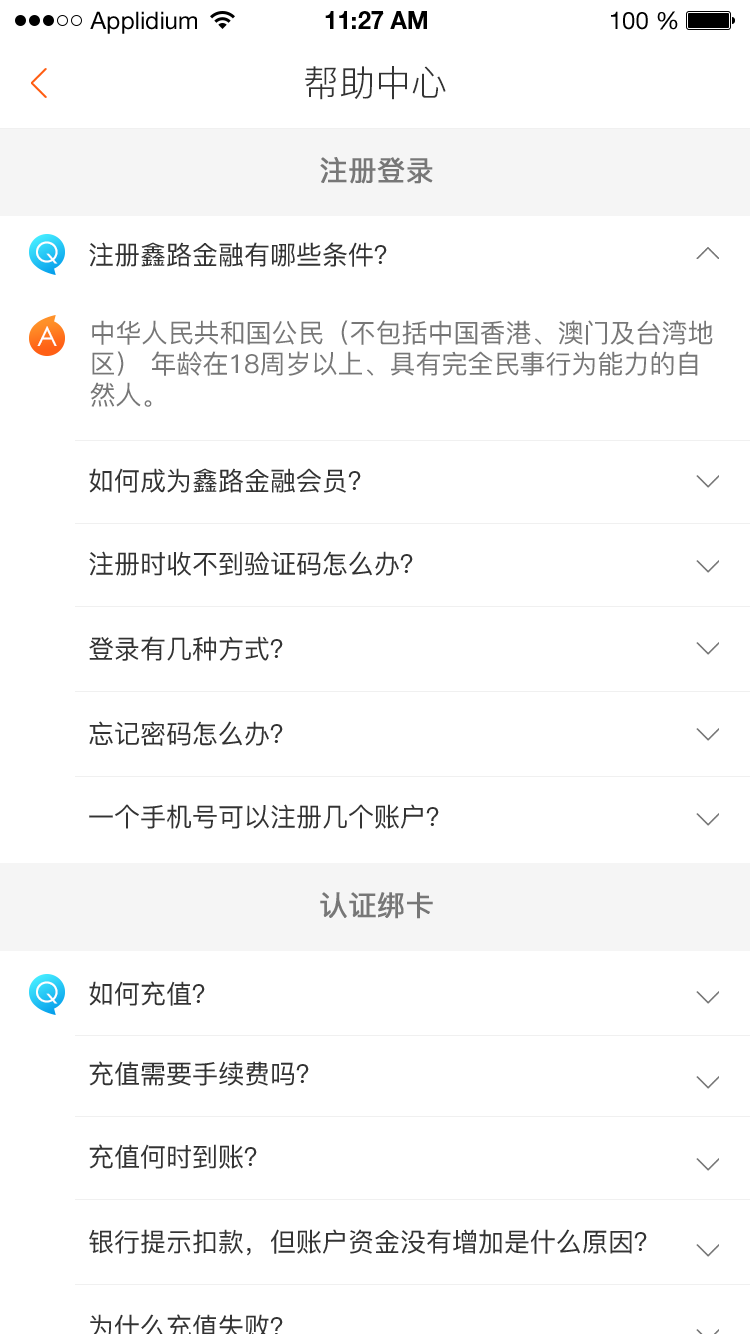
<style>
.page{position:relative;width:750px;height:1334px;background:#ffffff}
.page>*{position:absolute;margin:0}
.t1{font:24px "HelveticaNeueLTStd-Roman";color:#000000}
.t2{font:24px "HelveticaNeueLTStd-Bd";color:#000000}
.t3{font:36px "PingFang-SC-Regular";color:#333333}
.t4{font:28px "PingFang-SC-Medium";color:#777777;font-weight:bold}
.t5{font:28px "CenturyGothic";color:#ffffff}
.t6{font:26px "PingFang-SC-Medium";color:#333333}
.t7{font:26px "PingFang-SC-Medium";color:#777777}
</style>
<div class="page">
<p class="t1" style="left:90px;top:11px;width:107px;height:23px">Applidium</p>
<p class="t2" style="left:325px;top:11px;width:102px;height:18px">11:27 AM</p>
<p class="t1" style="left:611px;top:11px;width:67px;height:19px">100 %</p>
<p class="t3" style="left:305px;top:66px;width:141px;height:34px">帮助中心</p>
<p class="t4" style="left:320px;top:157px;width:113px;height:27px">注册登录</p>
<p class="t5" style="left:36px;top:241px;width:22px;height:23px">Q</p>
<p class="t6" style="left:89px;top:242px;width:298px;height:25px">注册鑫路金融有哪些条件？</p>
<p class="t5" style="left:37px;top:326px;width:20px;height:20px">A</p>
<p class="t7" style="left:90px;top:320px;width:623px;height:87px">中华人民共和国公民（不包括中国香港、澳门及台湾地区） 年龄在18周岁以上、具有完全民事行为能力的自然人。</p>
<p class="t6" style="left:89px;top:468px;width:272px;height:25px">如何成为鑫路金融会员？</p>
<p class="t6" style="left:89px;top:551px;width:324px;height:25px">注册时收不到验证码怎么办？</p>
<p class="t6" style="left:89px;top:636px;width:194px;height:25px">登录有几种方式？</p>
<p class="t6" style="left:89px;top:721px;width:194px;height:25px">忘记密码怎么办？</p>
<p class="t6" style="left:89px;top:804px;width:350px;height:25px">一个手机号可以注册几个账户？</p>
<p class="t4" style="left:320px;top:892px;width:113px;height:27px">认证绑卡</p>
<p class="t5" style="left:36px;top:981px;width:22px;height:23px">Q</p>
<p class="t6" style="left:89px;top:981px;width:116px;height:25px">如何充值？</p>
<p class="t6" style="left:89px;top:1061px;width:220px;height:25px">充值需要手续费吗？</p>
<p class="t6" style="left:89px;top:1144px;width:168px;height:25px">充值何时到账？</p>
<p class="t6" style="left:89px;top:1229px;width:558px;height:27px">银行提示扣款，但账户资金没有增加是什么原因？</p>
</div>
